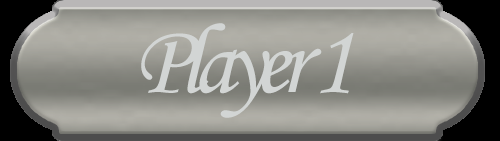
<style>
.page{position:relative;width:500px;height:141px}
.page>*{position:absolute;margin:0}
.t1{font:100px "MonotypeCorsiva";letter-spacing:-0.1em;color:#d2d5d4}
</style>
<div class="page">
<p class="t1" style="left:141px;top:23px;width:213px;height:95px">Player 1</p>
</div>
